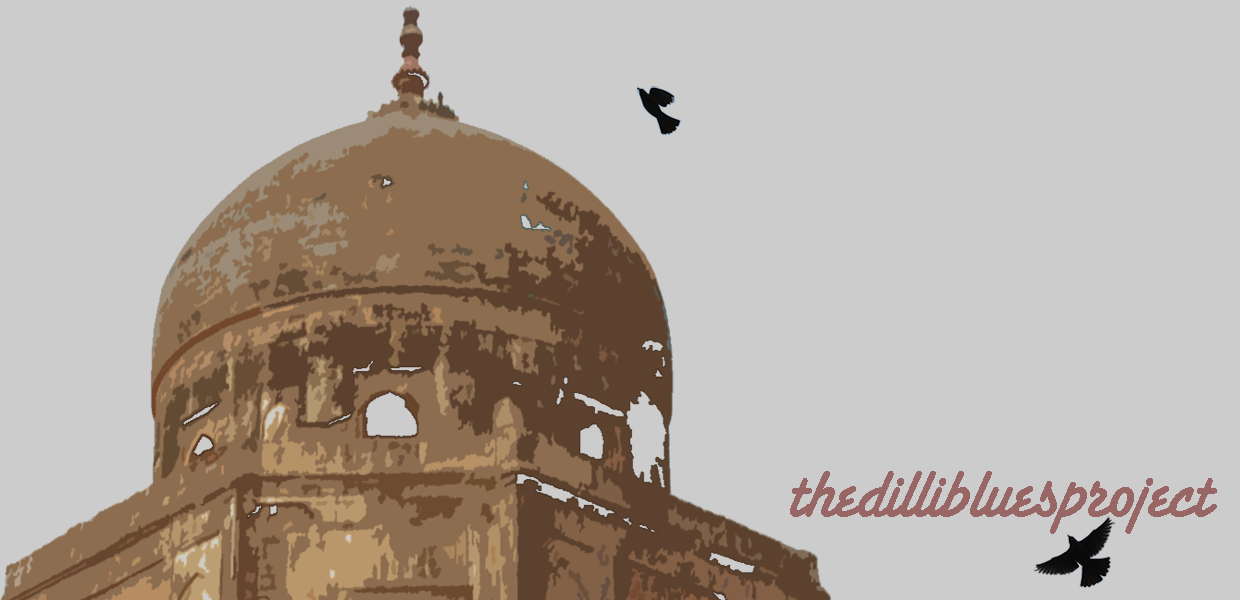
<style>
.page{position:relative;width:1240px;height:600px;background:#cccccc}
.page>*{position:absolute;margin:0}
.t1{font:83.1px "SantaFeLetPlain";color:#996666;scale:0.93 1}
</style>
<div class="page">
<p class="t1" style="left:790px;top:471px;width:427px;height:63px">thedillibluesproject</p>
</div>
